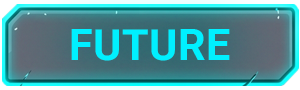
<style>
.page{position:relative;width:300px;height:90px}
.page>*{position:absolute;margin:0}
.t1{font:42.9px "Roboto-Bold";letter-spacing:-0.02em;color:#00f0ff;text-transform:uppercase}
</style>
<div class="page">
<p class="t1" style="left:71px;top:29px;width:159px;height:32px">FUTURE</p>
</div>
